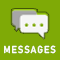
<style>
.page{position:relative;width:60px;height:60px;background:#7faa06}
.page>*{position:absolute;margin:0}
.t1{font:10px "Bahnschrift_526wght";letter-spacing:0.1em;color:#ffffff;scale:0.9 1}
</style>
<div class="page">
<p class="t1" style="left:4px;top:45px;width:52px;height:9px">MESSAGES</p>
</div>
